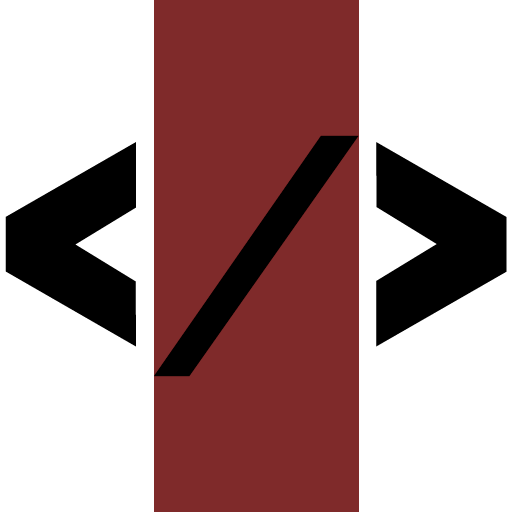
<style>
.page{position:relative;width:512px;height:512px;background:#ffffff}
.page>*{position:absolute;margin:0}
.t1{font:300px "LatinWide";color:#000000}
</style>
<div class="page">
<p class="t1" style="left:5px;top:135px;width:502px;height:242px">&lt;/&gt;</p>
</div>
